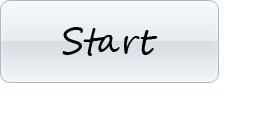
<style>
.page{position:relative;width:256px;height:128px;background:#ffffff}
.page>*{position:absolute;margin:0}
.t1{font:36px "SegoeScript";color:#000000}
</style>
<div class="page">
<p class="t1" style="left:62px;top:27px;width:96px;height:29px">Start</p>
</div>
